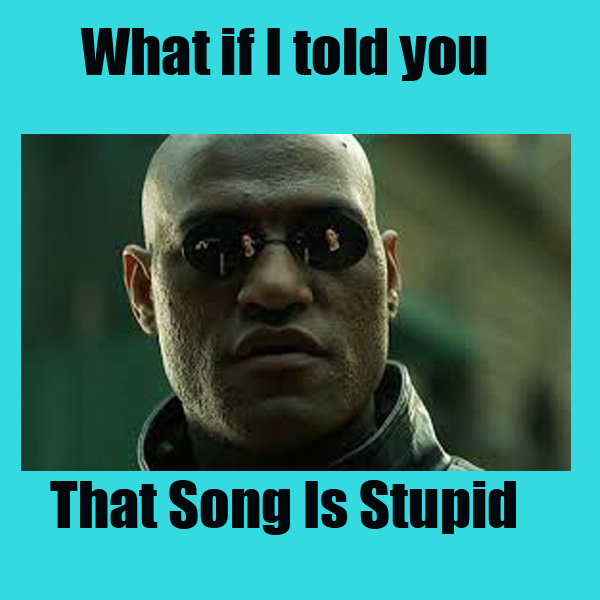
<style>
.page{position:relative;width:600px;height:600px;background:#34dae0}
.page>*{position:absolute;margin:0}
.t1{font:60px "Impact";color:#01080b}
</style>
<div class="page">
<p class="t1" style="left:80px;top:28px;width:407px;height:53px">What if I told you</p>
<p class="t1" style="left:50px;top:480px;width:466px;height:55px">That Song Is Stupid</p>
</div>
